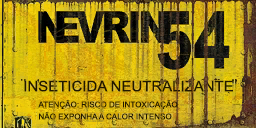
<style>
.page{position:relative;width:256px;height:128px}
.page>*{position:absolute;margin:0}
.t1{font:14.6px "ArialMT";color:#211800;text-transform:uppercase}
.t2{font:8px/12px "ArialMT";color:#211800;text-transform:uppercase}
</style>
<div class="page">
<p class="t1" style="left:24px;top:80px;width:209px;height:12px">Inseticida neutralizante</p>
<p class="t2" style="left:38px;top:100px;width:140px;height:20px">Atenção: Risco de intoxicação<br>Não exponha a calor intenso</p>
</div>
